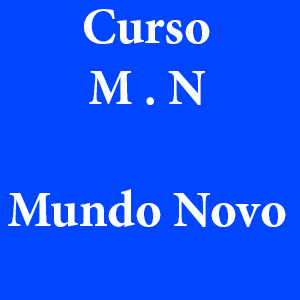
<style>
.page{position:relative;width:300px;height:300px;background:#0245ff}
.page>*{position:absolute;margin:0}
.t1{font:50.8px "MinionPro-Bold";color:#f9ffff}
</style>
<div class="page">
<p class="t1" style="left:8px;top:9px;width:278px;height:218px;text-align:center">Curso<br>M . N<br><br>Mundo Novo</p>
</div>
